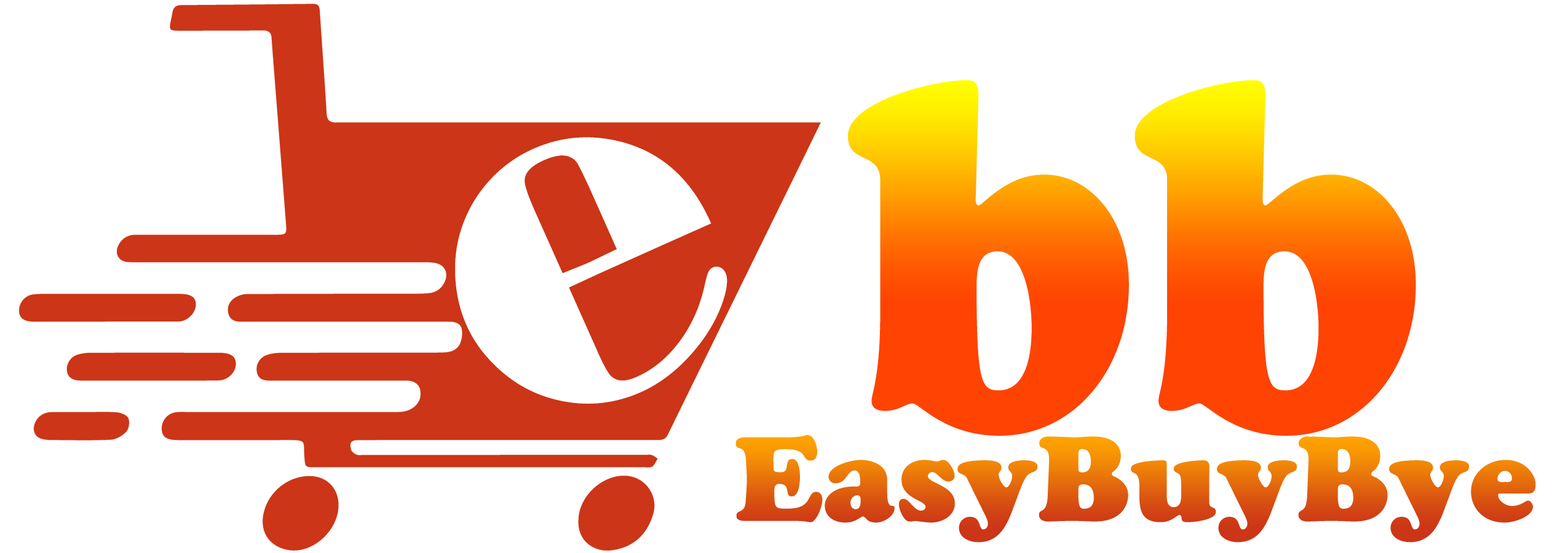
<style>
.page{position:relative;width:1568px;height:553px;background:#ffffff}
.page>*{position:absolute;margin:0}
.t1{font:497.5px "CooperBlackStd";scale:0.87 1}
.t2{font:477.3px "Broadway";color:#ffffff}
.t3{font:119.1px "CooperBlackStd"}
</style>
<div class="page">
<p class="t1" style="left:847px;top:80px;width:569px;height:357px">bb</p>
<p class="t2" style="left:455px;top:137px;width:272px;height:267px;rotate:-24deg">e</p>
<p class="t3" style="left:735px;top:435px;width:801px;height:108px">EasyBuyBye</p>
</div>
